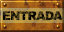
<style>
.page{position:relative;width:64px;height:32px}
.page>*{position:absolute;margin:0}
.t1{font:12px "Arial-Black";letter-spacing:-0.055em;text-transform:uppercase}
</style>
<div class="page">
<p class="t1" style="left:3px;top:11px;width:60px;height:10px">Entrada</p>
</div>
